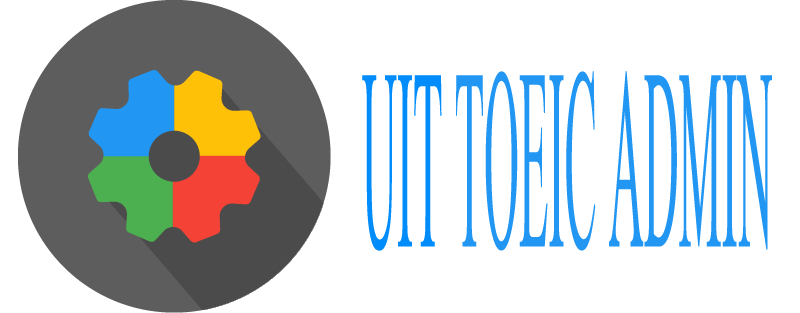
<style>
.page{position:relative;width:800px;height:313px;background:#ffffff}
.page>*{position:absolute;margin:0}
.t1{font:258.4px "TimesNewRomanPSMT";color:#2196f3;scale:0.19 1}
.t2{font:258.4px "TimesNewRomanPSMT";color:#008cfb;scale:0.19 1}
</style>
<div class="page">
<p class="t1" style="left:362px;top:71px;width:410px;height:180px"><span class="t2">UIT </span>TOEIC ADMIN</p>
</div>
